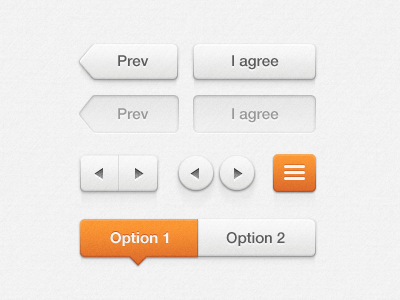
<style>
.page{position:relative;width:400px;height:300px}
.page>*{position:absolute;margin:0}
.t1{font:15px "HelveticaNeue-Medium";color:#454343}
.t2{font:15px "HelveticaNeue-Medium";color:#8b8b8b}
.t3{font:15px "HelveticaNeue-Bold";color:#f3f8f8}
</style>
<div class="page">
<p class="t1" style="left:118px;top:55px;width:31px;height:12px">Prev</p>
<p class="t1" style="left:232px;top:55px;width:47px;height:15px">I agree</p>
<p class="t2" style="left:118px;top:108px;width:31px;height:12px">Prev</p>
<p class="t2" style="left:232px;top:108px;width:47px;height:15px">I agree</p>
<p class="t3" style="left:110px;top:232px;width:59px;height:14px">Option 1</p>
<p class="t1" style="left:226px;top:232px;width:59px;height:14px">Option 2</p>
</div>
